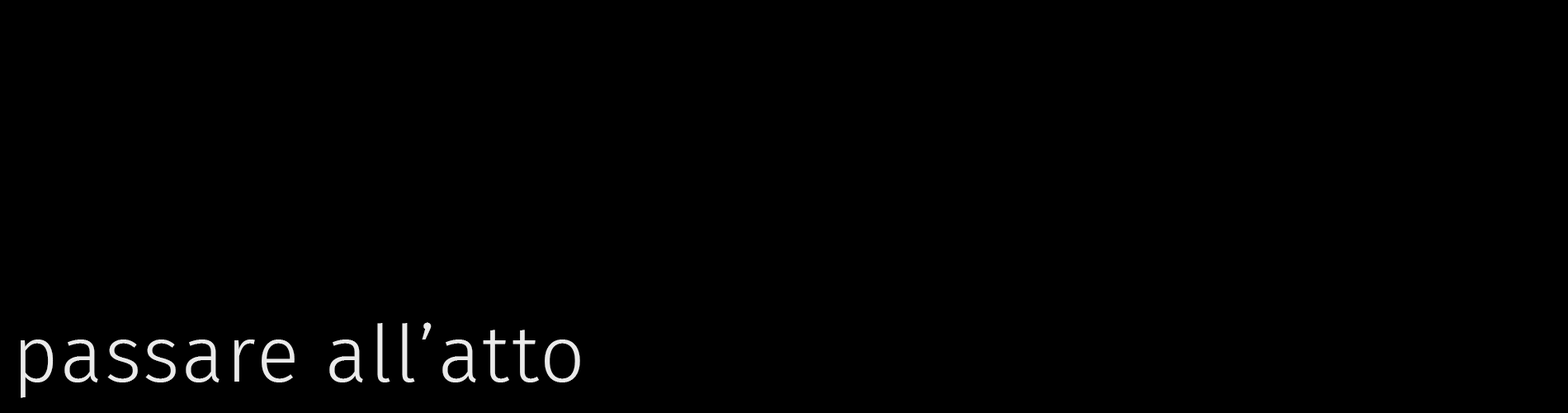
<style>
.page{position:relative;width:1568px;height:413px;background:#000000}
.page>*{position:absolute;margin:0}
.t1{font:79.1px "FiraSans-Light";letter-spacing:0.025em;color:#eaeaea}
</style>
<div class="page">
<p class="t1" style="left:21px;top:322px;width:559px;height:76px">passare all’atto</p>
</div>
